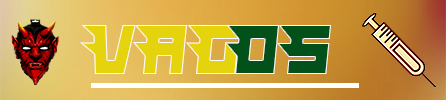
<style>
.page{position:relative;width:446px;height:100px}
.page>*{position:absolute;margin:0}
.t1{font:70.9px "Hindsight2020";color:#e5d30e;scale:0.94 1}
.t2{font:70.9px "Hindsight2020";color:#02501a;scale:0.94 1}
</style>
<div class="page">
<p class="t1" style="left:80px;top:25px;width:161px;height:49px">VAG</p>
<p class="t2" style="left:225px;top:25px;width:107px;height:49px">OS</p>
</div>
